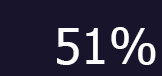
<style>
.page{position:relative;width:162px;height:76px;background:#18142c}
.page>*{position:absolute;margin:0}
.t1{font:50px "Tahoma";color:#ffffff}
</style>
<div class="page">
<p class="t1" style="left:57px;top:27px;width:99px;height:38px">51%</p>
</div>
